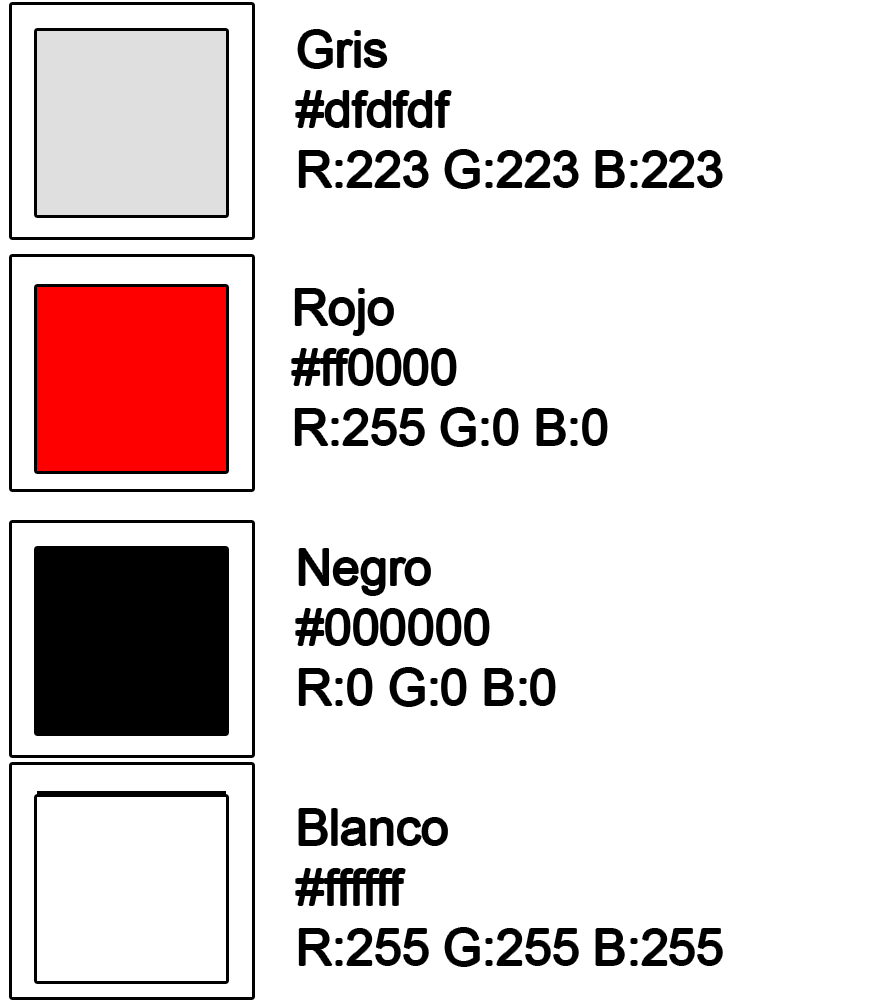
<style>
.page{position:relative;width:890px;height:1003px;background:#ffffff}
.page>*{position:absolute;margin:0}
.t1{font:50px "ArialMT";color:#000000}
</style>
<div class="page">
<p class="t1" style="left:296px;top:30px;width:426px;height:158px">Gris<br>#dfdfdf<br>R:223 G:223 B:223</p>
<p class="t1" style="left:292px;top:289px;width:315px;height:157px">Rojo<br>#ff0000<br>R:255 G:0 B:0</p>
<p class="t1" style="left:296px;top:549px;width:259px;height:157px">Negro<br>#000000<br>R:0 G:0 B:0</p>
<p class="t1" style="left:296px;top:809px;width:426px;height:157px">Blanco<br>#ffffff<br>R:255 G:255 B:255</p>
</div>
